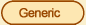
<style>
.page{position:relative;width:86px;height:25px;background:#fde7b2}
.page>*{position:absolute;margin:0}
.t1{font:12px "ArialMT";letter-spacing:-0.04em;color:#994700;font-weight:bold}
</style>
<div class="page">
<p class="t1" style="left:19px;top:8px;width:42px;height:10px">Generic</p>
</div>
